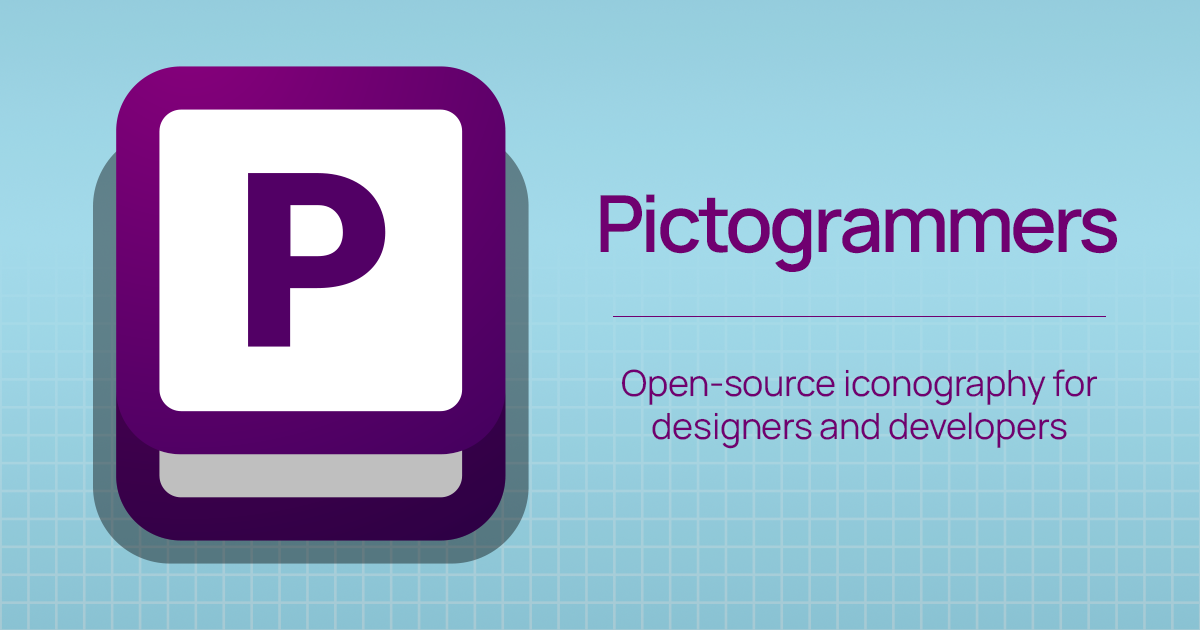
<style>
.page{position:relative;width:1200px;height:630px}
.page>*{position:absolute;margin:0}
.t1{font:78.8px "Manrope-SemiBold";letter-spacing:-0.05em;color:#700070}
.t2{font:36px "Manrope-Regular";letter-spacing:-0.01em;color:#700070}
</style>
<div class="page">
<p class="t1" style="left:600px;top:194px;width:517px;height:78px">Pictogrammers</p>
<p class="t2" style="left:621px;top:369px;width:477px;height:80px;text-align:center">Open-source iconography for<br>designers and developers</p>
</div>
